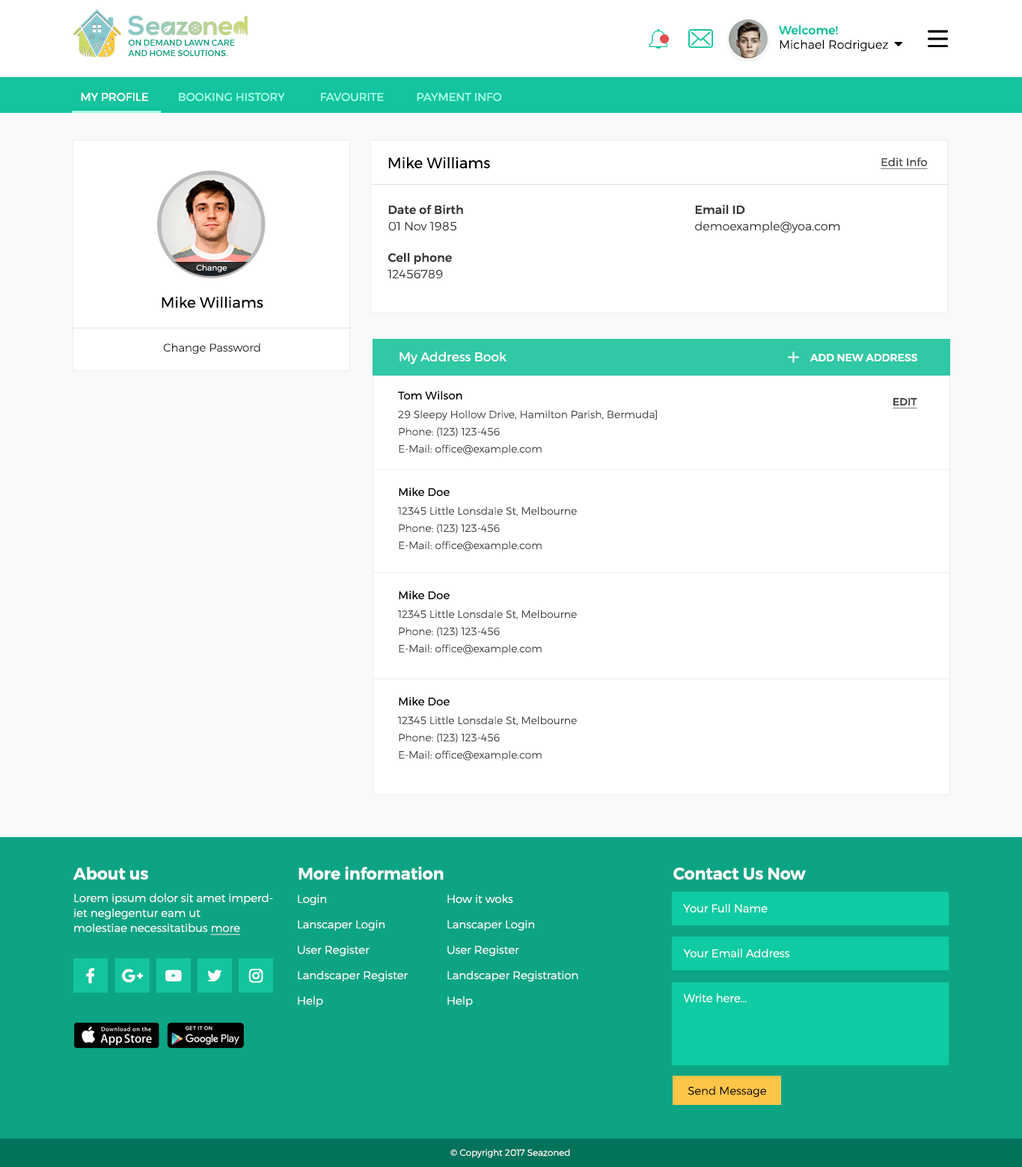
<style>
.page{position:relative;width:1022px;height:1167px;background:#ffffff}
.page>*{position:absolute;margin:0}
.t1{font:12px "Montserrat-Light";color:#000000}
.t2{font:12px "Montserrat-Medium";color:#13c49e}
.t3{font:8.2px "Montserrat-Medium";color:#0da484;text-transform:uppercase}
.t4{font:11.2px "Montserrat-Regular";color:#a6feeb;text-transform:uppercase}
.t5{font:11.2px "Montserrat-Regular";color:#ffffff;text-transform:uppercase}
.t6{font:15px "Montserrat-Regular";color:#000000}
.t7{font:11.2px "Montserrat-Regular";color:#474747;text-decoration:underline}
.t8{font:12px/16.5px "Montserrat-Medium";color:#383838}
.t9{font:12px/16.5px "Montserrat-Light";color:#383838}
.t10{font:8.1px "Montserrat-Light";color:#ffffff}
.t11{font:11.2px "Montserrat-Light";color:#2f2f2f}
.t12{font:12.7px "Montserrat-Regular";color:#ffffff}
.t13{font:10.5px "Montserrat-Medium";color:#ffffff;text-transform:uppercase}
.t14{font:11.2px "Montserrat-Regular";color:#000000}
.t15{font:10.5px "Montserrat-Medium";color:#474747;text-decoration:underline}
.t16{font:10.5px/17.2px "Montserrat-Light";color:#474747}
.t17{font:16.5px "Montserrat-SemiBold";color:#ffffff}
.t18{font:11.2px/15px "Montserrat-Light";color:#ffffff}
.t19{font:11.2px/15px "Montserrat-Light";color:#ffffff;text-decoration:underline}
.t20{font:11.2px/25.4px "Montserrat-Light";color:#ffffff}
.t21{font:11.2px "Montserrat-Light";color:#ffffff}
.t22{font:11.2px "Montserrat-Light";color:#000000}
.t23{font:9px "Montserrat-Light";color:#ffffff}
</style>
<div class="page">
<p class="t1" style="left:779px;top:25px;width:109px;height:27px"><span class="t2">Welcome! <br></span>Michael Rodriguez</p>
<p class="t3" style="left:128px;top:40px;width:107px;height:16px">on demand lawn care <br>and home solutions.</p>
<p class="t4" style="left:81px;top:93px;width:421px;height:9px"><span class="t5">my profile</span>          booking history            favourite           payment info</p>
<p class="t6" style="left:388px;top:157px;width:102px;height:11px">Mike Williams</p>
<p class="t7" style="left:880px;top:157px;width:48px;height:12px">Edit Info</p>
<p class="t8" style="left:388px;top:204px;width:75px;height:27px">Date of Birth<br><span class="t9">01 Nov 1985</span></p>
<p class="t9" style="left:695px;top:204px;width:145px;height:29px"><span class="t8">Email ID<br></span>demoexample@yoa.com</p>
<p class="t8" style="left:387px;top:253px;width:65px;height:26px">Cell phone<br><span class="t9">12456789</span></p>
<p class="t10" style="left:196px;top:264px;width:31px;height:8px">Change</p>
<p class="t6" style="left:162px;top:296px;width:101px;height:12px">Mike Williams</p>
<p class="t11" style="left:163px;top:343px;width:97px;height:11px">Change Password</p>
<p class="t12" style="left:399px;top:352px;width:107px;height:12px">My Address Book</p>
<p class="t13" style="left:809px;top:354px;width:108px;height:8px">Add new address</p>
<p class="t14" style="left:398px;top:390px;width:64px;height:10px">Tom Wilson</p>
<p class="t15" style="left:892px;top:398px;width:25px;height:10px">EDIT</p>
<p class="t16" style="left:398px;top:410px;width:259px;height:45px">29 Sleepy Hollow Drive, Hamilton Parish, Bermuda]<br>Phone: (123) 123-456<br>E-Mail: office@example.com</p>
<p class="t14" style="left:399px;top:487px;width:51px;height:10px">Mike Doe</p>
<p class="t16" style="left:398px;top:506px;width:179px;height:45px">12345 Little Lonsdale St, Melbourne<br>Phone: (123) 123-456<br>E-Mail: office@example.com</p>
<p class="t14" style="left:399px;top:590px;width:51px;height:10px">Mike Doe</p>
<p class="t16" style="left:398px;top:610px;width:179px;height:45px">12345 Little Lonsdale St, Melbourne<br>Phone: (123) 123-456<br>E-Mail: office@example.com</p>
<p class="t14" style="left:399px;top:696px;width:51px;height:10px">Mike Doe</p>
<p class="t16" style="left:398px;top:716px;width:179px;height:45px">12345 Little Lonsdale St, Melbourne<br>Phone: (123) 123-456<br>E-Mail: office@example.com</p>
<p class="t17" style="left:73px;top:867px;width:75px;height:13px">About us</p>
<p class="t17" style="left:298px;top:866px;width:146px;height:14px">More information</p>
<p class="t17" style="left:673px;top:867px;width:133px;height:13px">Contact Us Now</p>
<p class="t18" style="left:74px;top:893px;width:199px;height:42px">Lorem ipsum dolor sit amet imperdiet neglegentur eam ut<br>molestiae necessitatibus <span class="t19">more</span></p>
<p class="t20" style="left:447px;top:894px;width:131px;height:113px">How it woks<br>Lanscaper Login<br>User Register<br>Landscaper Registration<br>Help</p>
<p class="t20" style="left:298px;top:895px;width:110px;height:112px">Login<br>Lanscaper Login<br>User Register<br>Landscaper Register<br>Help</p>
<p class="t21" style="left:683px;top:904px;width:84px;height:9px">Your Full Name</p>
<p class="t21" style="left:683px;top:949px;width:106px;height:9px">Your Email Address</p>
<p class="t21" style="left:683px;top:993px;width:64px;height:9px">Write here...</p>
<p class="t22" style="left:687px;top:1086px;width:79px;height:11px">Send Message</p>
<p class="t23" style="left:450px;top:1149px;width:120px;height:9px">© Copyright 2017 Seazoned</p>
</div>
